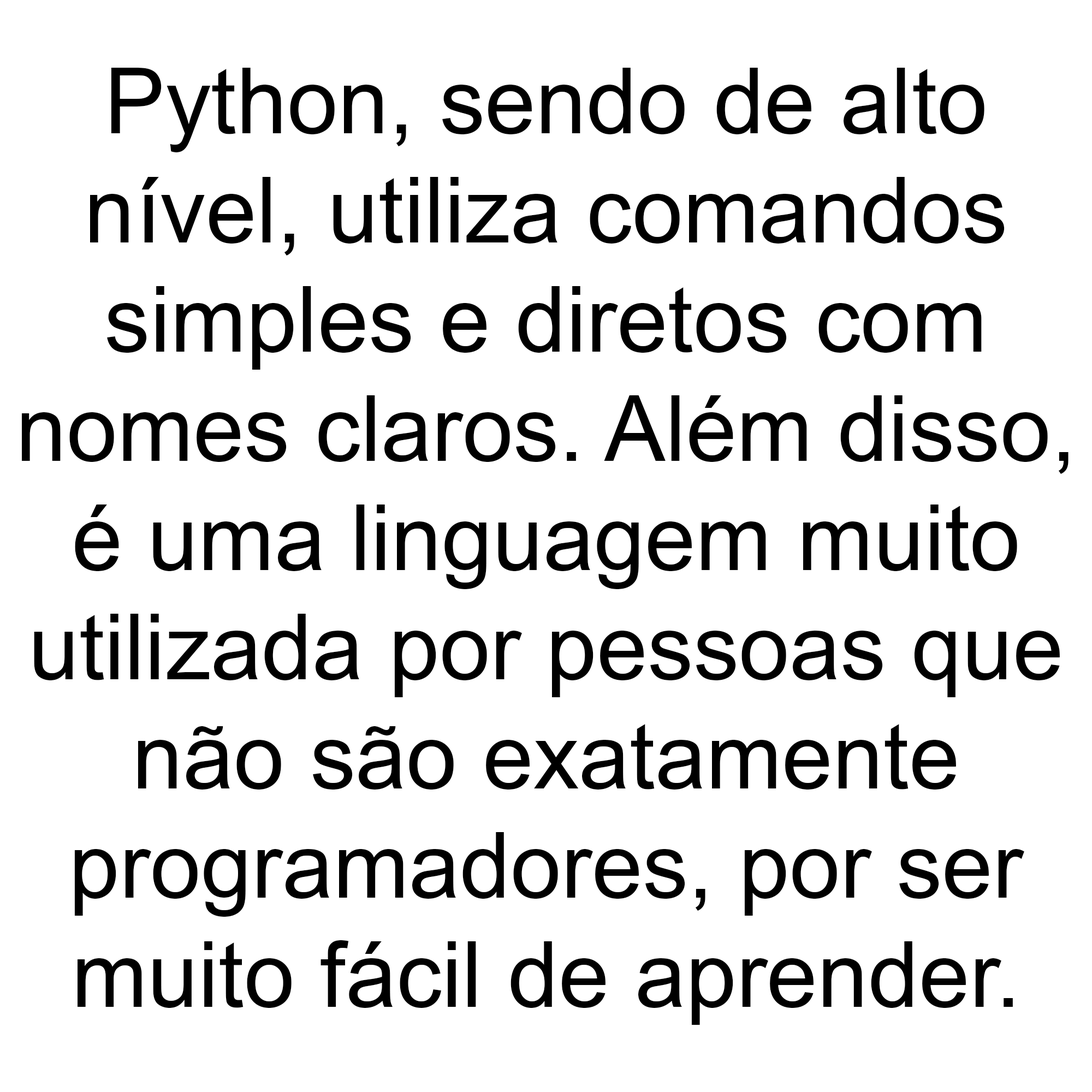
<style>
.page{position:relative;width:1092px;height:1092px;background:#ffffff}
.page>*{position:absolute;margin:0}
.t1{font:91px "ArialMT";color:#000000}
</style>
<div class="page">
<p class="t1" style="left:22px;top:68px;width:1047px;height:957px;text-align:center">Python, sendo de alto<br>nível, utiliza comandos<br>simples e diretos com<br>nomes claros. Além disso,<br>é uma linguagem muito<br>utilizada por pessoas que<br>não são exatamente<br>programadores, por ser<br>muito fácil de aprender.</p>
</div>
